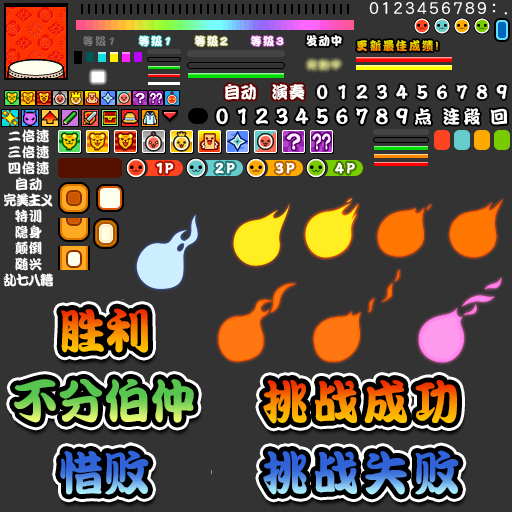
<style>
.page{position:relative;width:512px;height:512px;background:#333333}
.page>*{position:absolute;margin:0}
.t1{font:11px "DFPKanTingLiuW9";letter-spacing:0.2em;color:#777777;scale:0.96 1}
.t2{font:11px "DFPKanTingLiuW9";letter-spacing:0.2em;color:#ffffff;scale:0.96 1}
.t3{font:12px "DFPKanTingLiuW9";letter-spacing:0.08em;color:#ffffff;scale:0.96 1}
.t4{font:12px "DFPKanTingLiuW9";letter-spacing:0.14em;scale:0.96 1}
.t5{font:17px "DFPKanTingLiuW9";letter-spacing:0.04em;color:#ffffff;scale:0.96 1}
.t6{font:17px "DFPKanTingLiuW9";letter-spacing:0.05em;color:#ffffff;scale:0.96 1}
.t7{font:18px "DFPKanTingLiuW9";letter-spacing:0.2em;color:#ffffff;scale:0.96 1}
.t8{font:14px "DFPKanTingLiuW9";letter-spacing:0.05em;color:#ffffff;scale:0.96 1}
.t9{font:14px "DFPKanTingLiuW9";letter-spacing:-0.1em;color:#ffffff;scale:0.96 1}
.t10{font:48px "DFPKanTingLiuW9";scale:0.96 1}
.t11{font:48px "DFPKanTingLiuW9";letter-spacing:0.1em;scale:0.96 1}
</style>
<div class="page">
<p class="t1" style="left:83px;top:36px;width:31px;height:11px">等级1</p>
<p class="t2" style="left:139px;top:36px;width:31px;height:11px">等级1</p>
<p class="t2" style="left:195px;top:36px;width:33px;height:11px">等级2</p>
<p class="t2" style="left:251px;top:36px;width:33px;height:11px">等级3</p>
<p class="t3" style="left:306px;top:35px;width:36px;height:12px">发动中</p>
<p class="t4" style="left:357px;top:40px;width:81px;height:12px">更新最佳成绩!</p>
<p class="t5" style="left:225px;top:84px;width:31px;height:16px">自动</p>
<p class="t6" style="left:272px;top:84px;width:33px;height:16px">演奏</p>
<p class="t7" style="left:443px;top:108px;width:37px;height:17px">连段</p>
<p class="t8" style="left:8px;top:129px;width:41px;height:14px">二倍速</p>
<p class="t8" style="left:8px;top:145px;width:41px;height:14px">三倍速</p>
<p class="t8" style="left:8px;top:161px;width:41px;height:14px">四倍速</p>
<p class="t8" style="left:15px;top:177px;width:27px;height:14px">自动</p>
<p class="t9" style="left:4px;top:193px;width:49px;height:14px">完美主义</p>
<p class="t8" style="left:15px;top:209px;width:27px;height:14px">特训</p>
<p class="t8" style="left:15px;top:225px;width:27px;height:14px">隐身</p>
<p class="t8" style="left:15px;top:241px;width:27px;height:14px">颠倒</p>
<p class="t8" style="left:15px;top:257px;width:27px;height:14px">随兴</p>
<p class="t9" style="left:3px;top:273px;width:50px;height:14px">乱七八糟</p>
<p class="t10" style="left:61px;top:308px;width:87px;height:45px">胜利</p>
<p class="t10" style="left:14px;top:379px;width:180px;height:44px">不分伯仲</p>
<p class="t11" style="left:263px;top:380px;width:194px;height:44px">挑战成功</p>
<p class="t10" style="left:60px;top:450px;width:89px;height:45px">惜败</p>
<p class="t11" style="left:263px;top:450px;width:196px;height:45px">挑战失败</p>
</div>
